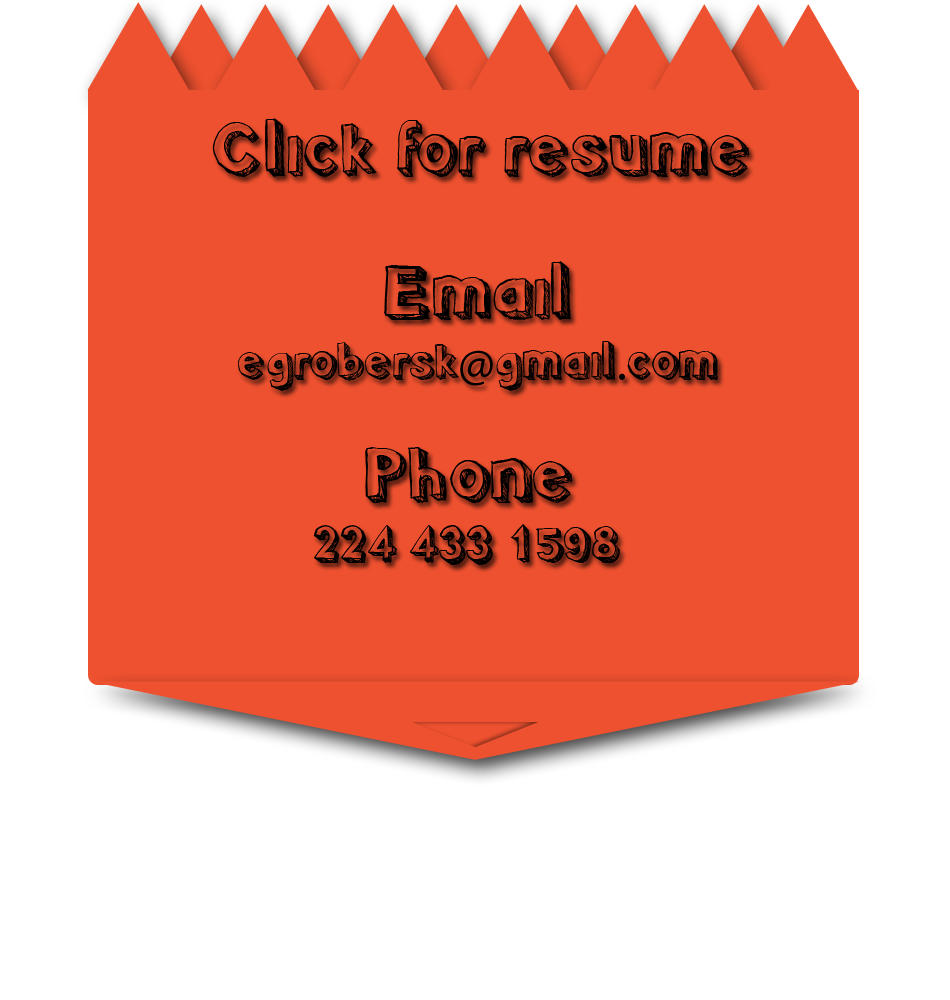
<style>
.page{position:relative;width:950px;height:1000px;background:#ee512f}
.page>*{position:absolute;margin:0}
.t1{font:75px "Pointy";color:#000000}
.t2{font:50px "Pointy";color:#000000}
.t3{font:50px "MyriadPro-Regular";color:#000000}
</style>
<div class="page">
<p class="t1" style="left:212px;top:118px;width:538px;height:59px">Click for resume</p>
<p class="t2" style="left:237px;top:261px;width:481px;height:130px;text-align:center"><span class="t1">Email <br></span>egrobersk<span class="t3">@</span>gmail<span class="t3">.</span>com</p>
<p class="t2" style="left:313px;top:447px;width:307px;height:118px;text-align:center"><span class="t1">Phone<br></span>224 433 1598</p>
</div>
